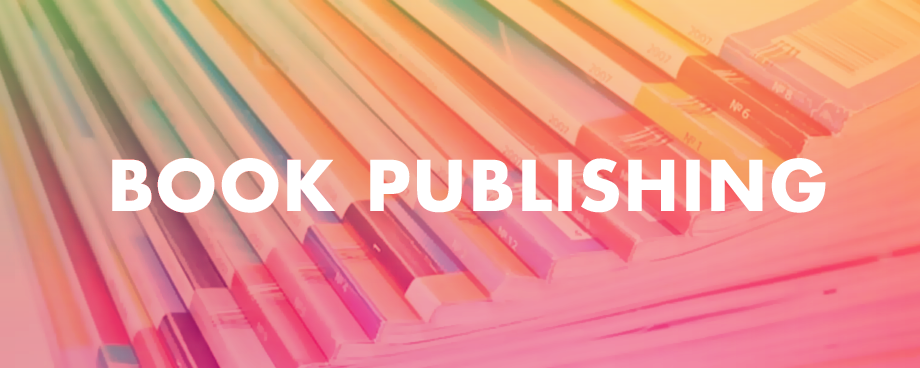
<style>
.page{position:relative;width:920px;height:368px}
.page>*{position:absolute;margin:0}
.t1{font:68px "FuturaLT-Bold";letter-spacing:0.06em;color:#ffffff}
</style>
<div class="page">
<p class="t1" style="left:112px;top:158px;width:714px;height:55px">BOOK PUBLISHING</p>
</div>
